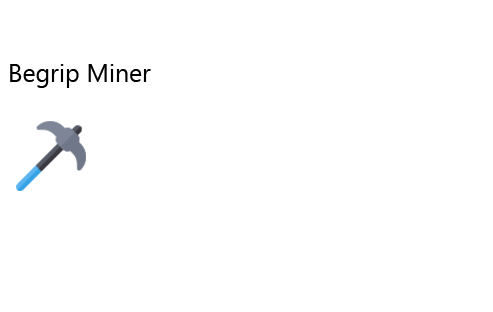
<style>
.page{position:relative;width:493px;height:312px;background:#ffffff}
.page>*{position:absolute;margin:0}
.t1{font:25px "MicrosoftTaiLe";color:#000000}
</style>
<div class="page">
<p class="t1" style="left:10px;top:64px;width:141px;height:24px">Begrip Miner</p>
</div>
